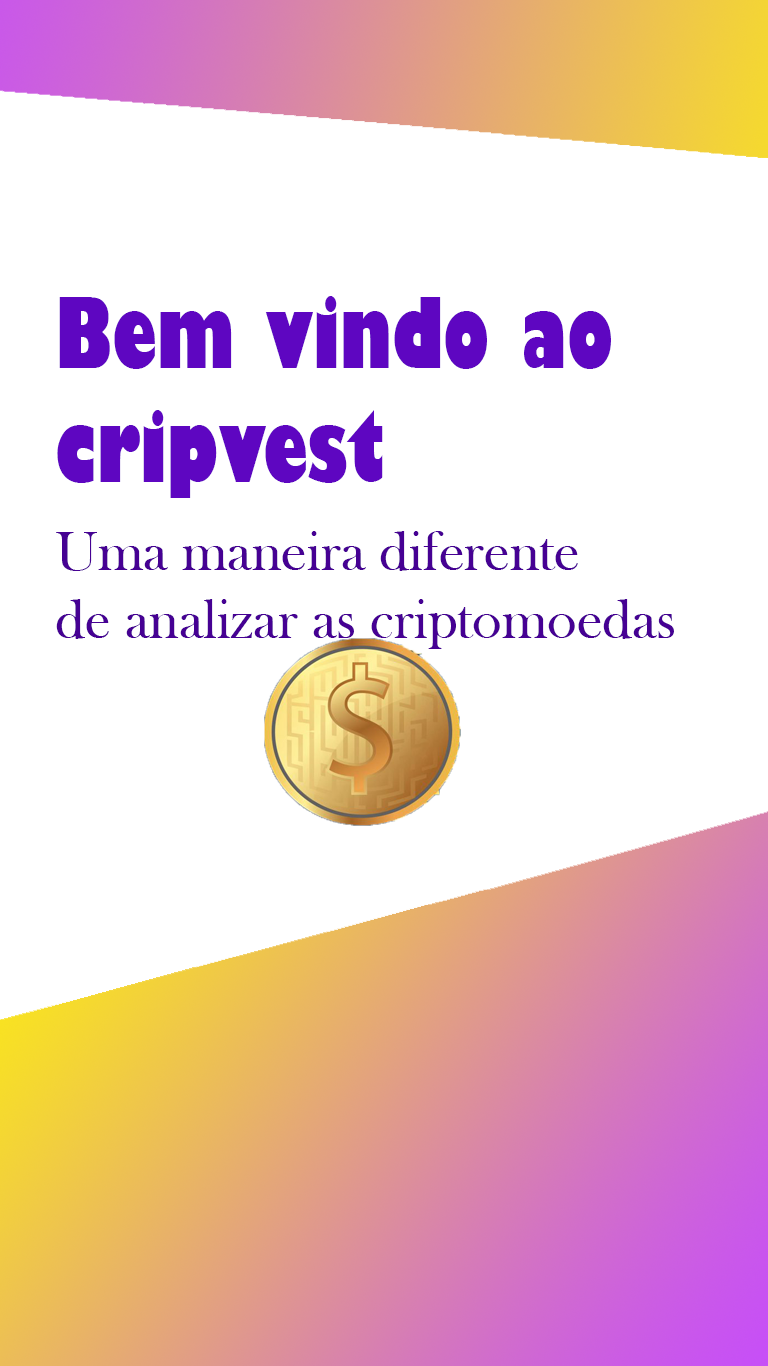
<style>
.page{position:relative;width:768px;height:1366px;background:#ffffff}
.page>*{position:absolute;margin:0}
.t1{font:95px "GillSans-UltraBoldCondensed";color:#5e06c1}
.t2{font:56.9px "BaskOldFace";color:#460193}
</style>
<div class="page">
<p class="t1" style="left:57px;top:296px;width:554px;height:202px">Bem vindo ao <br>cripvest</p>
<p class="t2" style="left:56px;top:531px;width:618px;height:118px">Uma maneira diferente<br>de analizar as criptomoedas</p>
</div>
